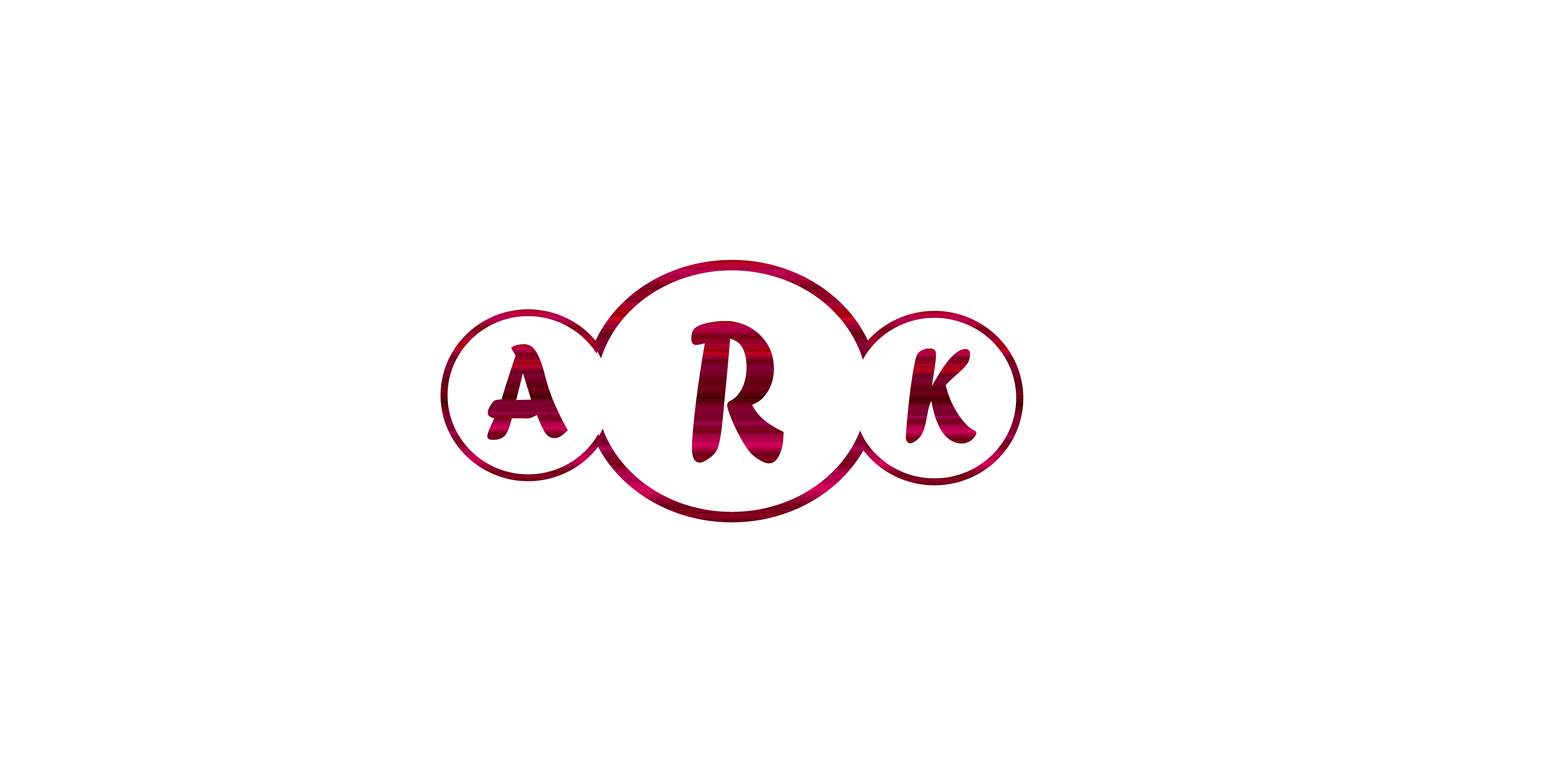
<style>
.page{position:relative;width:1544px;height:772px;background:#ffffff}
.page>*{position:absolute;margin:0}
.t1{font:218.9px "ForteMT";scale:0.73 1}
.t2{font:140.9px "ForteMT";scale:0.81 1}
</style>
<div class="page">
<p class="t1" style="left:691px;top:321px;width:93px;height:143px;rotate:-1deg">R</p>
<p class="t2" style="left:487px;top:344px;width:81px;height:96px;rotate:-1deg">A</p>
<p class="t2" style="left:906px;top:348px;width:71px;height:96px;rotate:-1deg">K</p>
</div>
